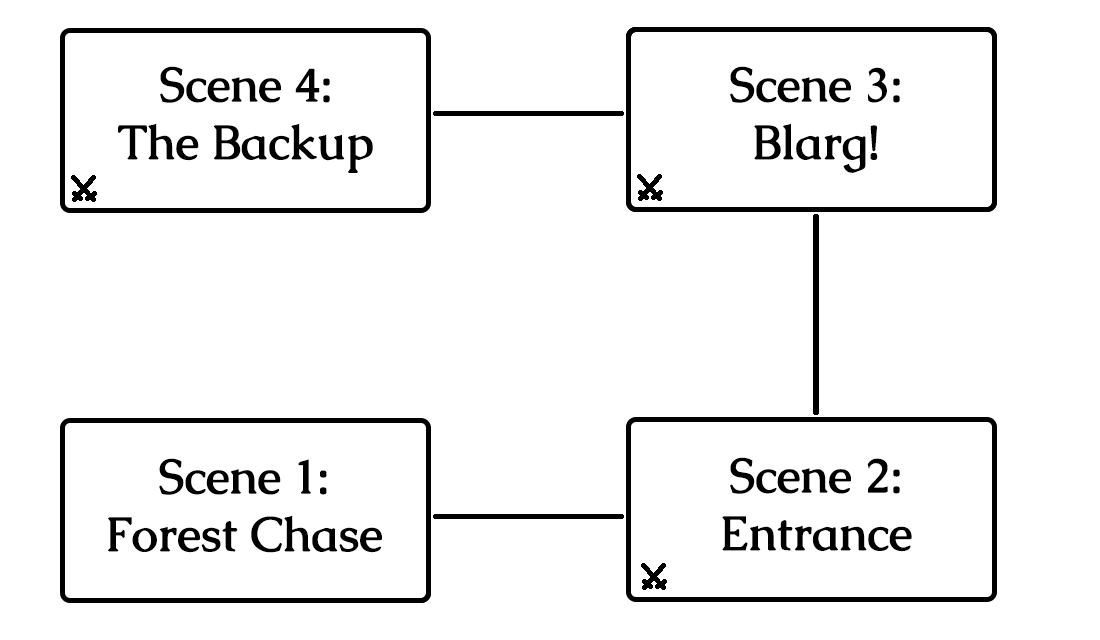
<style>
.page{position:relative;width:1100px;height:640px;background:#ffffff}
.page>*{position:absolute;margin:0}
.t1{font:48px "Caudex-Bold";color:#000000}
</style>
<div class="page">
<p class="t1" style="left:118px;top:66px;width:255px;height:107px;text-align:center">Scene 4:<br>The Backup</p>
<p class="t1" style="left:730px;top:66px;width:170px;height:107px;text-align:center">Scene 3:<br>Blarg!</p>
<p class="t1" style="left:108px;top:458px;width:274px;height:95px;text-align:center">Scene 1:<br>Forest Chase</p>
<p class="t1" style="left:722px;top:457px;width:190px;height:95px;text-align:center">Scene 2:<br>Entrance</p>
</div>
